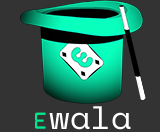
<style>
.page{position:relative;width:160px;height:132px;background:#333333}
.page>*{position:absolute;margin:0}
.t1{font:32.3px "SpaceMono-Regular";color:#ffffff;scale:1.05 1}
</style>
<div class="page">
<p class="t1" style="left:49px;top:106px;width:82px;height:24px">wala</p>
</div>
